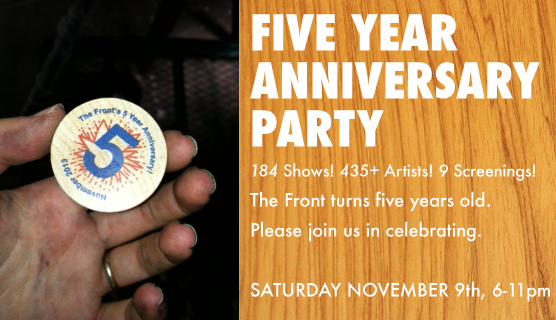
<style>
.page{position:relative;width:556px;height:320px}
.page>*{position:absolute;margin:0}
.t1{font:18px/30px "Futura-Medium";color:#ffffff}
.t2{font:48px/48px "Futura-CondensedExtraBold";color:#ffffff}
.t3{font:16px/30px "Futura-MediumItalic";color:#ffffff}
.t4{font:16px/30px "Futura-Medium";color:#ffffff}
</style>
<div class="page">
<p class="t1" style="left:250px;top:14px;width:300px;height:288px"><span class="t2">FIVE YEAR <br>ANNIVERSARY PARTY<br></span><span class="t3">184</span><span class="t4"> Shows! </span><span class="t3">435+</span><span class="t4"> Artists! </span><span class="t3">9</span><span class="t4"> Screenings!<br></span>The Front turns five years old.<br>Please join us in celebrating.<br><br>SATURDAY NOVEMBER 9th, 6-11pm</p>
</div>
